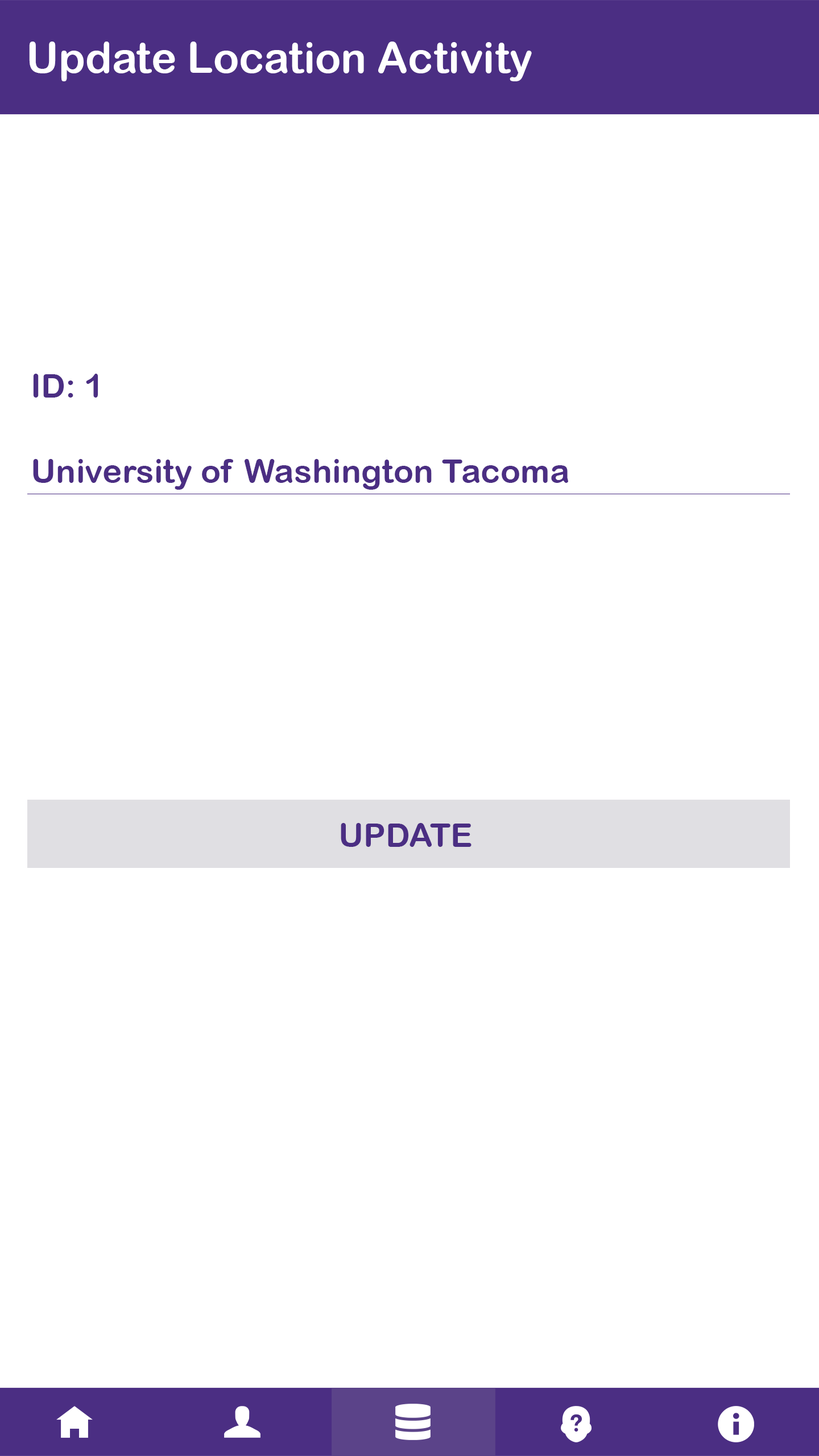
<style>
.page{position:relative;width:819px;height:1456px;background:#ffffff}
.page>*{position:absolute;margin:0}
.t1{font:42.7px "ArialRoundedMTBold";color:#ffffff}
.t2{font:33.2px "ArialRoundedMTBold";color:#4b2e83}
</style>
<div class="page">
<p class="t1" style="left:29px;top:42px;width:503px;height:39px">Update Location Activity</p>
<p class="t2" style="left:33px;top:374px;width:65px;height:24px">ID: 1</p>
<p class="t2" style="left:33px;top:459px;width:535px;height:31px">University of Washington Tacoma</p>
<p class="t2" style="left:341px;top:823px;width:130px;height:24px">UPDATE</p>
</div>
